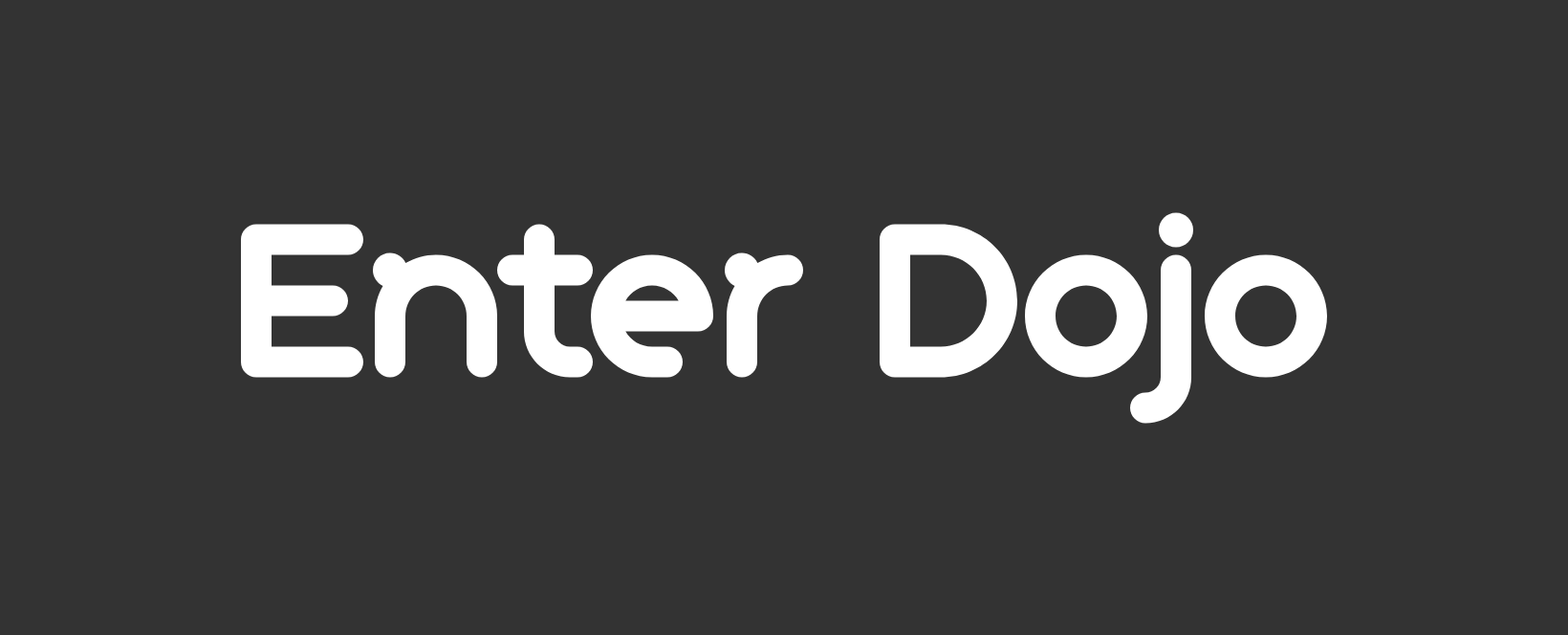
<style>
.page{position:relative;width:1568px;height:635px;background:#333333}
.page>*{position:absolute;margin:0}
.t1{font:239px "GeometrySoftPro-BoldN";color:#ffffff}
</style>
<div class="page">
<p class="t1" style="left:241px;top:212px;width:1086px;height:212px">Enter Dojo</p>
</div>
